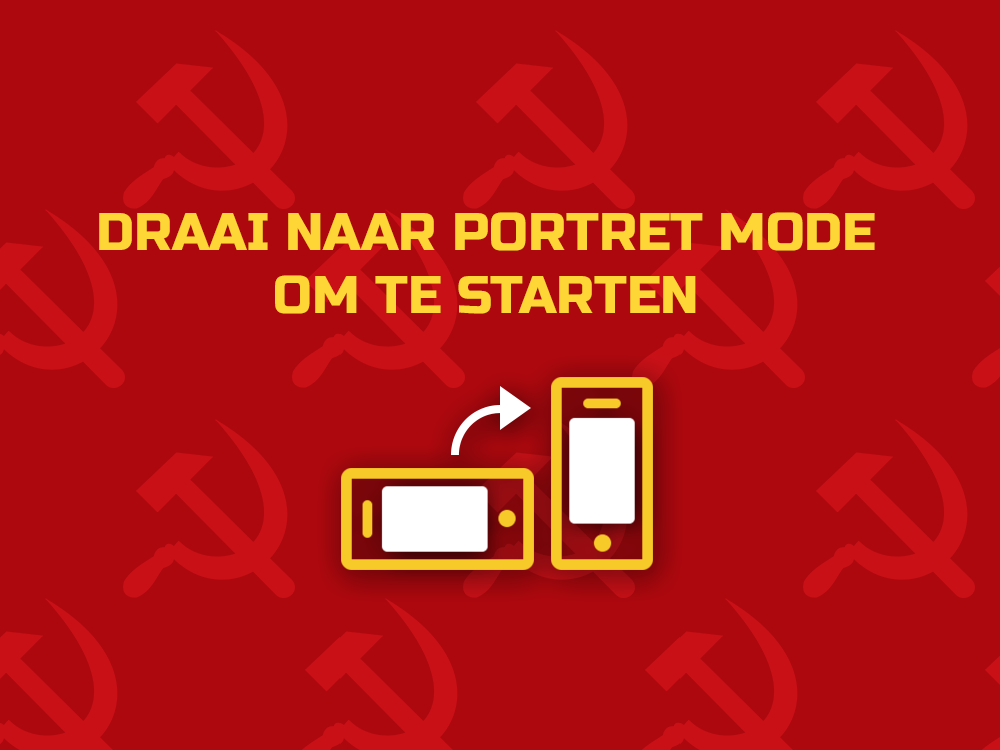
<style>
.page{position:relative;width:1000px;height:750px;background:#ad080e}
.page>*{position:absolute;margin:0}
.t1{font:52.7px "RussoOne-Regular";color:#fed635;text-transform:uppercase}
</style>
<div class="page">
<p class="t1" style="left:99px;top:212px;width:776px;height:102px;text-align:center">draai naar portret mode<br>om te starten</p>
</div>
